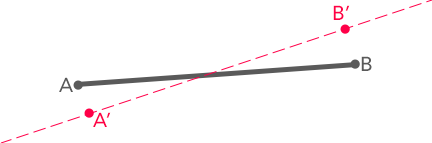
<style>
.page{position:relative;width:432px;height:143px;background:#ffffff}
.page>*{position:absolute;margin:0}
.t1{font:20px "Avenir-Medium";letter-spacing:0.01em;color:#ff0048}
.t2{font:20px "Avenir-Medium";letter-spacing:0.01em;color:#5a5a5a}
</style>
<div class="page">
<p class="t1" style="left:333px;top:5px;width:17px;height:15px">B’</p>
<p class="t2" style="left:361px;top:56px;width:11px;height:15px">B</p>
<p class="t2" style="left:59px;top:77px;width:14px;height:15px">A</p>
<p class="t1" style="left:93px;top:112px;width:18px;height:15px">A’</p>
</div>
